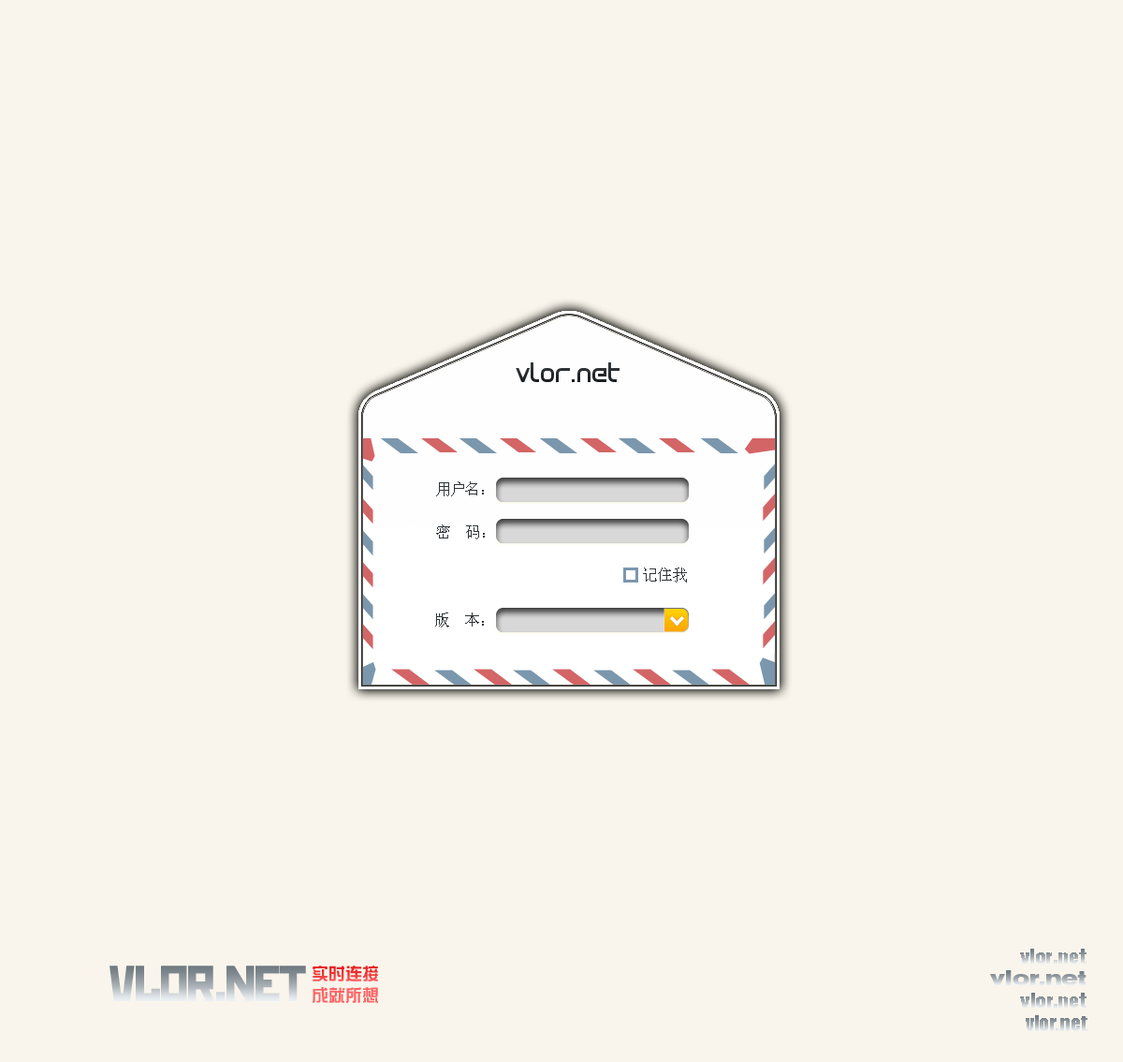
<style>
.page{position:relative;width:1123px;height:1062px;background:#f9f5ec}
.page>*{position:absolute;margin:0}
.t1{font:28.1px "Simplistic";color:#262a2d}
.t2{font:15px "SimSun";color:#313639}
.t3{font:15px "SimSun";color:#303538}
.t4{font:20.4px "AkzidenzGroteskBQ-XBoldAlt"}
.t5{font:58.2px "Liebe-Ist-FÃ¼r-Alle-Da-Regular"}
.t6{font:16.8px/21.1px "HYk1gj"}
.t7{font:20.4px "AkzidenzGroteskBQ-BoldExt"}
.t8{font:20.4px "AkzidenzGroteskBQ-XBold"}
.t9{font:20.4px "Impact"}
</style>
<div class="page">
<p class="t1" style="left:516px;top:362px;width:104px;height:20px">vlor.net</p>
<p class="t2" style="left:436px;top:481px;width:48px;height:15px">用户名：</p>
<p class="t3" style="left:436px;top:524px;width:49px;height:15px">密  码：</p>
<p class="t2" style="left:643px;top:567px;width:44px;height:15px">记住我</p>
<p class="t3" style="left:435px;top:612px;width:49px;height:15px">版  本：</p>
<p class="t4" style="left:1020px;top:948px;width:67px;height:15px">vlor.net</p>
<p class="t5" style="left:110px;top:965px;width:196px;height:36px">vlor.net</p>
<p class="t6" style="left:313px;top:965px;width:65px;height:38px">实时连接 <br>成就所想</p>
<p class="t7" style="left:990px;top:970px;width:97px;height:15px">vlor.net</p>
<p class="t8" style="left:1020px;top:992px;width:67px;height:15px">vlor.net</p>
<p class="t9" style="left:1026px;top:1015px;width:62px;height:16px">vlor.net</p>
</div>
